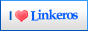
<style>
.page{position:relative;width:88px;height:31px;background:#ffffff}
.page>*{position:absolute;margin:0}
.t1{font:14px "PiratesBay";color:#005afe}
</style>
<div class="page">
<p class="t1" style="left:30px;top:9px;width:48px;height:12px">Linkeros</p>
</div>
